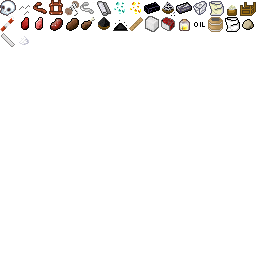
<style>
.page{position:relative;width:256px;height:256px;background:#ffffff}
.page>*{position:absolute;margin:0}
.t1{font:6.6px "ArialMT";color:#000000}
</style>
<div class="page">
<p class="t1" style="left:194px;top:22px;width:11px;height:5px">OIL</p>
</div>
